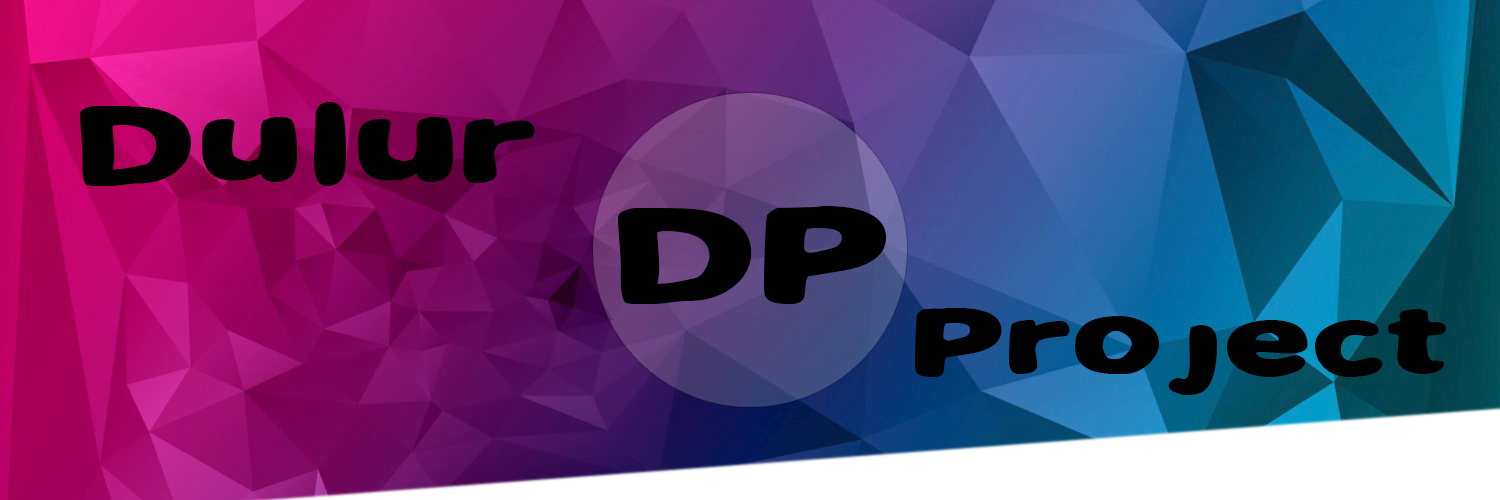
<style>
.page{position:relative;width:1500px;height:500px}
.page>*{position:absolute;margin:0}
.t1{font:100px "Sweetascandy";letter-spacing:0.05em;color:#000000}
.t2{font:120px "Sweetascandy";letter-spacing:0.05em;color:#000000}
.t3{font:85px "Sweetascandy";letter-spacing:0.05em;color:#000000}
</style>
<div class="page">
<p class="t1" style="left:80px;top:102px;width:455px;height:84px">Dulur</p>
<p class="t2" style="left:618px;top:206px;width:269px;height:98px">DP</p>
<p class="t3" style="left:915px;top:308px;width:531px;height:87px">Project</p>
</div>
